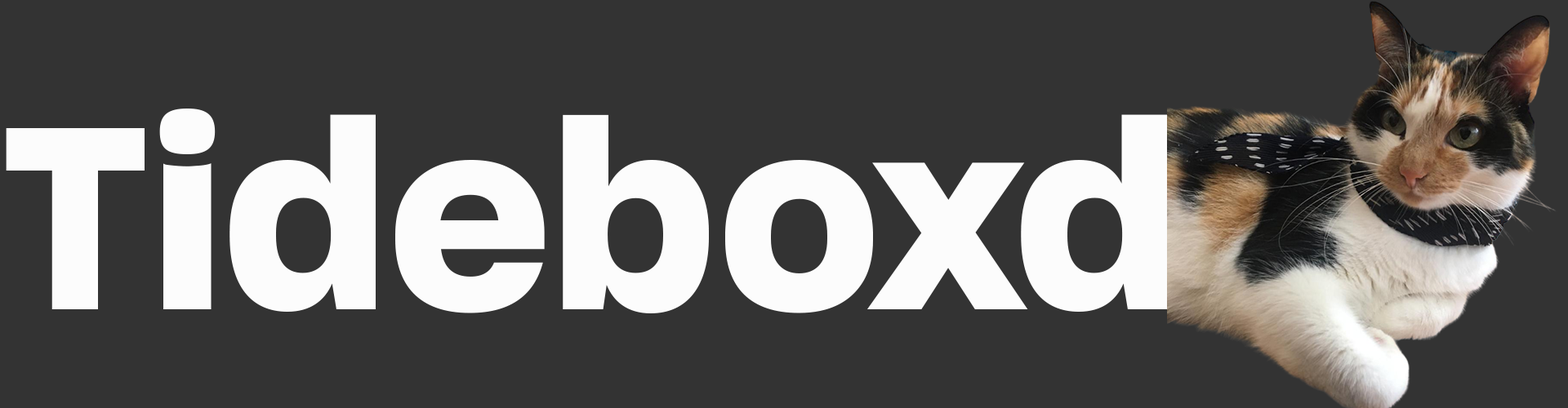
<style>
.page{position:relative;width:1568px;height:408px;background:#333333}
.page>*{position:absolute;margin:0}
.t1{font:252.8px "SharpGrotesk-SemiBold20";color:#fcfcfc}
.t2{font:252.8px "SharpGrotesk-SemiBold20";color:#fcfcfc;text-transform:uppercase}
</style>
<div class="page">
<p class="t1" style="left:6px;top:109px;width:1161px;height:205px"><span class="t2">t</span>ideboxd</p>
</div>
